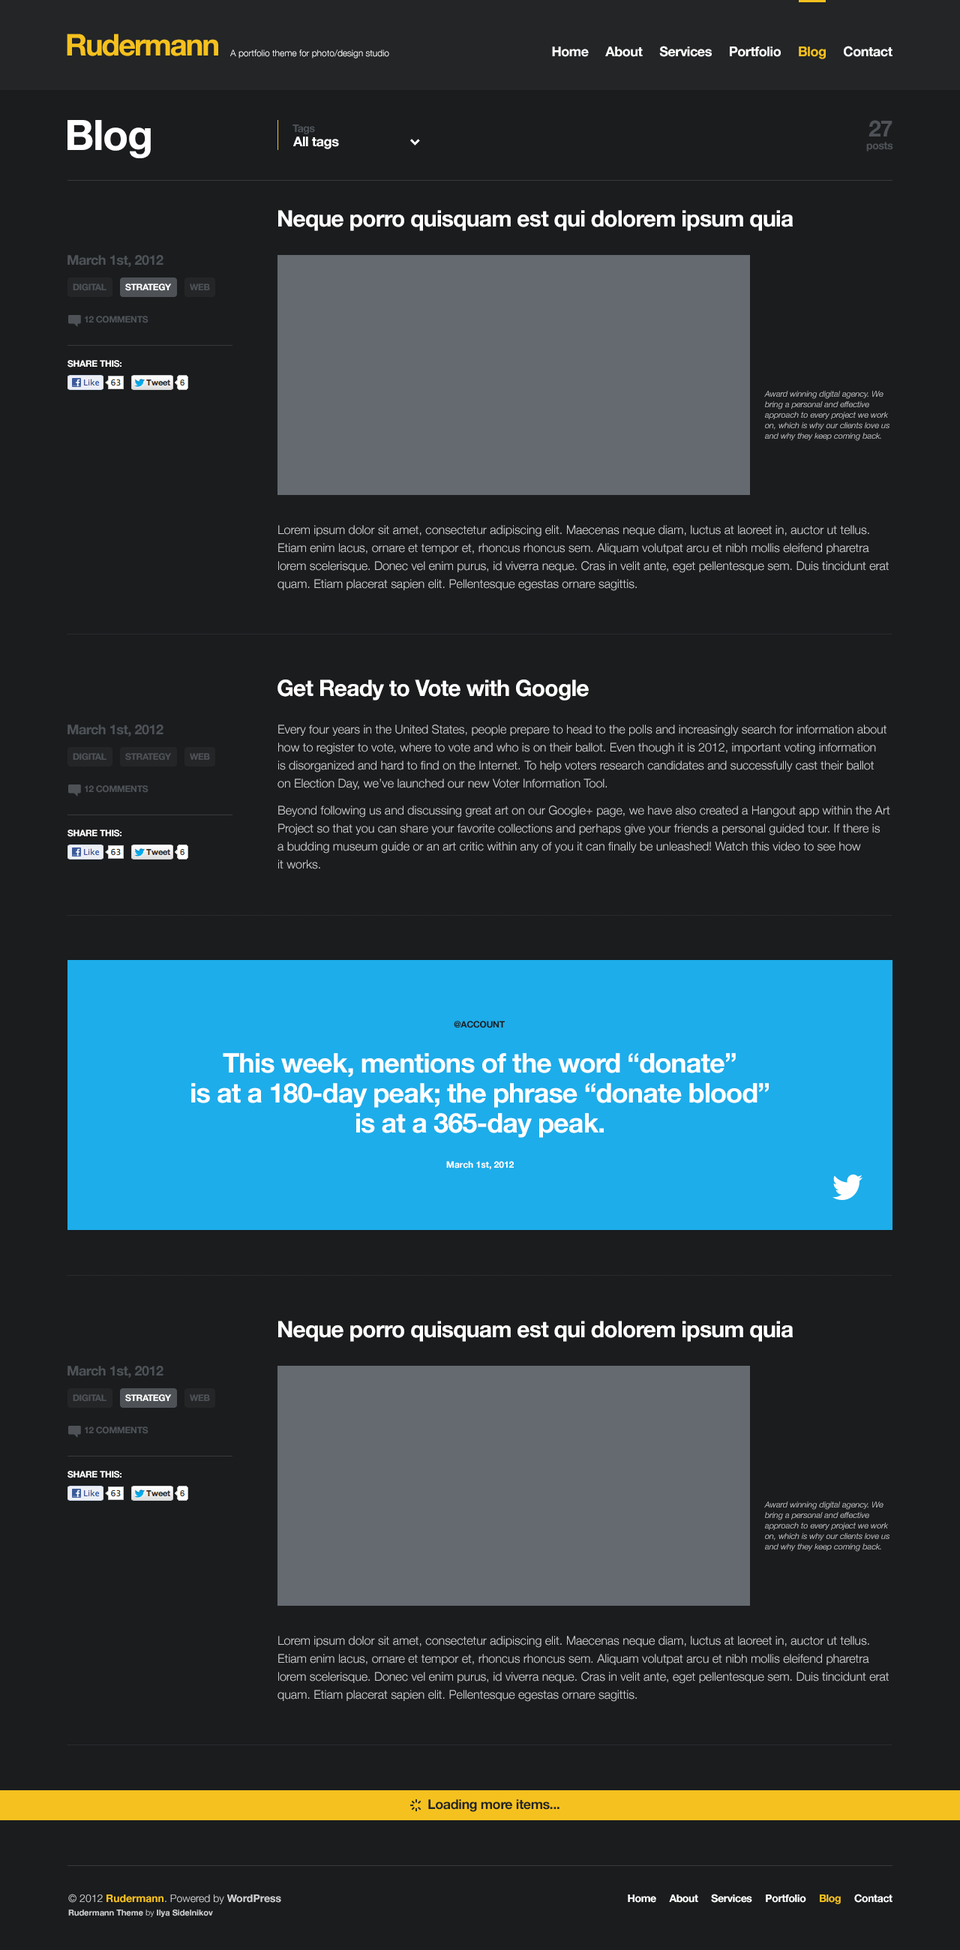
<style>
.page{position:relative;width:960px;height:1950px;background:#1a1c1e}
.page>*{position:absolute;margin:0}
.t1{font:30px "HelveticaNeue-Bold";letter-spacing:-0.05em;color:#f5c11e}
.t2{font:9px "HelveticaNeue-Light";color:#ffffff}
.t3{font:13.5px "HelveticaNeue-Bold";letter-spacing:-0.025em;color:#ffffff}
.t4{font:13.5px "HelveticaNeue-Bold";letter-spacing:-0.025em;color:#f5c11e}
.t5{font:42px "HelveticaNeue-Bold";letter-spacing:-0.025em;color:#ffffff}
.t6{font:10.5px "HelveticaNeue-Bold";letter-spacing:-0.025em;color:#4e5257}
.t7{font:22.5px "HelveticaNeue-Bold";letter-spacing:-0.025em;color:#4e5257}
.t8{font:22.5px "HelveticaNeue-Bold";letter-spacing:-0.025em;color:#ffffff}
.t9{font:13.5px "HelveticaNeue-Bold";letter-spacing:-0.025em;color:#4e5257}
.t10{font:9px "HelveticaNeue-Bold";letter-spacing:-0.025em;color:#4e5257}
.t11{font:9px "HelveticaNeue-Bold";letter-spacing:-0.025em;color:#ffffff}
.t12{font:9px "HelveticaNeue-Bold";letter-spacing:-0.025em;color:#4e5257;text-transform:uppercase}
.t13{font:9px "HelveticaNeue-Bold";letter-spacing:-0.025em;color:#ffffff;text-transform:uppercase}
.t14{font:8.2px/10.5px "HelveticaNeue-LightItalic";color:#ccced0}
.t15{font:12px/18px "HelveticaNeue-Light";color:#ccced0}
.t16{font:12px/27px "HelveticaNeue-Light";color:#ccced0}
.t17{font:9px "HelveticaNeue-Bold";letter-spacing:-0.025em;color:#1a1c1e;text-transform:uppercase}
.t18{font:27px/30px "HelveticaNeue-Bold";letter-spacing:-0.025em;color:#ffffff}
.t19{font:9px "HelveticaNeue-Bold";color:#ffffff}
.t20{font:13.5px "HelveticaNeue-Bold";letter-spacing:-0.025em;color:#232527}
.t21{font:8.2px/13.5px "HelveticaNeue-Bold";color:#ccced0}
.t22{font:10.5px/13.5px "HelveticaNeue-Light";color:#ccced0}
.t23{font:10.5px/13.5px "HelveticaNeue-Bold";color:#f5c11e}
.t24{font:10.5px/13.5px "HelveticaNeue-Bold";color:#ccced0}
.t25{font:8.2px/13.5px "HelveticaNeue-Light";color:#ccced0}
.t26{font:10.5px "HelveticaNeue-Bold";letter-spacing:-0.025em;color:#ffffff}
.t27{font:10.5px "HelveticaNeue-Bold";letter-spacing:-0.025em;color:#f5c11e}
</style>
<div class="page">
<p class="t1" style="left:67px;top:34px;width:151px;height:22px">Rudermann</p>
<p class="t2" style="left:230px;top:50px;width:159px;height:8px">A portfolio theme for photo/design studio</p>
<p class="t3" style="left:552px;top:46px;width:340px;height:13px">Home     About     Services     Portfolio     <span class="t4">Blog</span>     Contact</p>
<p class="t5" style="left:68px;top:120px;width:83px;height:38px">Blog</p>
<p class="t6" style="left:292px;top:124px;width:23px;height:10px">Tags</p>
<p class="t7" style="left:868px;top:120px;width:24px;height:16px">27</p>
<p class="t3" style="left:293px;top:136px;width:46px;height:13px">All tags</p>
<p class="t6" style="left:866px;top:142px;width:27px;height:10px">posts</p>
<p class="t8" style="left:278px;top:210px;width:515px;height:21px">Neque porro quisquam est qui dolorem ipsum quia</p>
<p class="t9" style="left:68px;top:255px;width:96px;height:12px">March 1st, 2012</p>
<p class="t10" style="left:73px;top:284px;width:33px;height:7px">DIGITAL</p>
<p class="t11" style="left:125px;top:284px;width:47px;height:7px">STRATEGY</p>
<p class="t10" style="left:190px;top:284px;width:20px;height:6px">WEB</p>
<p class="t12" style="left:85px;top:316px;width:63px;height:7px">12 comments</p>
<p class="t13" style="left:68px;top:360px;width:54px;height:8px">Share This:</p>
<p class="t14" style="left:764px;top:391px;width:126px;height:50px">Award winning digital agency. We<br>bring a personal and effective<br>approach to every project we work<br>on, which is why our clients love us<br>and why they keep coming back.</p>
<p class="t15" style="left:278px;top:525px;width:611px;height:66px">Lorem ipsum dolor sit amet, consectetur adipiscing elit. Maecenas neque diam, luctus at laoreet in, auctor ut tellus.<br>Etiam enim lacus, ornare et tempor et, rhoncus rhoncus sem. Aliquam volutpat arcu et nibh mollis eleifend pharetra<br>lorem scelerisque. Donec vel enim purus, id viverra neque. Cras in velit ante, eget pellentesque sem. Duis tincidunt erat<br>quam. Etiam placerat sapien elit. Pellentesque egestas ornare sagittis.</p>
<p class="t8" style="left:278px;top:680px;width:311px;height:20px">Get Ready to Vote with Google</p>
<p class="t9" style="left:68px;top:724px;width:96px;height:12px">March 1st, 2012</p>
<p class="t15" style="left:278px;top:724px;width:612px;height:145px">Every four years in the United States, people prepare to head to the polls and increasingly search for information about<br>how to register to vote, where to vote and who is on their ballot. Even though it is 2012, important voting information<br>is disorganized and hard to find on the Internet. To help voters research candidates and successfully cast their ballot<br>on Election Day, we’ve launched our new Voter Information Tool. <br><span class="t16">Beyond following us and discussing great art on our Google+ page, we have also created a Hangout app within the Art<br></span>Project so that you can share your favorite collections and perhaps give your friends a personal guided tour. If there is<br>a budding museum guide or an art critic within any of you it can finally be unleashed! Watch this video to see how<br>it works.</p>
<p class="t10" style="left:73px;top:753px;width:33px;height:7px">DIGITAL</p>
<p class="t10" style="left:125px;top:753px;width:47px;height:7px">STRATEGY</p>
<p class="t10" style="left:190px;top:753px;width:20px;height:7px">WEB</p>
<p class="t12" style="left:85px;top:785px;width:63px;height:8px">12 comments</p>
<p class="t13" style="left:68px;top:830px;width:54px;height:7px">Share This:</p>
<p class="t17" style="left:454px;top:1021px;width:51px;height:7px">@account</p>
<p class="t18" style="left:191px;top:1053px;width:578px;height:85px;text-align:center">This week, mentions of the word “donate”<br>is at a 180-day peak; the phrase “donate blood”<br>is at a 365-day peak.</p>
<p class="t19" style="left:446px;top:1161px;width:68px;height:8px">March 1st, 2012</p>
<p class="t8" style="left:278px;top:1321px;width:515px;height:21px">Neque porro quisquam est qui dolorem ipsum quia</p>
<p class="t9" style="left:68px;top:1366px;width:96px;height:12px">March 1st, 2012</p>
<p class="t10" style="left:73px;top:1394px;width:33px;height:8px">DIGITAL</p>
<p class="t11" style="left:125px;top:1394px;width:47px;height:8px">STRATEGY</p>
<p class="t10" style="left:190px;top:1394px;width:20px;height:7px">WEB</p>
<p class="t12" style="left:85px;top:1426px;width:63px;height:8px">12 comments</p>
<p class="t13" style="left:68px;top:1471px;width:54px;height:7px">Share This:</p>
<p class="t14" style="left:764px;top:1502px;width:126px;height:50px">Award winning digital agency. We<br>bring a personal and effective<br>approach to every project we work<br>on, which is why our clients love us<br>and why they keep coming back.</p>
<p class="t15" style="left:278px;top:1636px;width:611px;height:66px">Lorem ipsum dolor sit amet, consectetur adipiscing elit. Maecenas neque diam, luctus at laoreet in, auctor ut tellus.<br>Etiam enim lacus, ornare et tempor et, rhoncus rhoncus sem. Aliquam volutpat arcu et nibh mollis eleifend pharetra<br>lorem scelerisque. Donec vel enim purus, id viverra neque. Cras in velit ante, eget pellentesque sem. Duis tincidunt erat<br>quam. Etiam placerat sapien elit. Pellentesque egestas ornare sagittis.</p>
<p class="t20" style="left:428px;top:1799px;width:132px;height:13px">Loading more items...</p>
<p class="t21" style="left:68px;top:1894px;width:213px;height:23px"><span class="t22">© 2012 </span><span class="t23">Rudermann</span><span class="t22">. Powered by </span><span class="t24">WordPress<br></span>Rudermann Theme<span class="t25"> by </span>Ilya Sidelnikov</p>
<p class="t26" style="left:628px;top:1894px;width:264px;height:10px">Home     About     Services     Portfolio     <span class="t27">Blog</span>     Contact</p>
</div>
